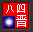
<style>
.page{position:relative;width:33px;height:32px;background:#f20000}
.page>*{position:absolute;margin:0}
.t1{font:10.4px "SimSun";color:#ffffff}
.t2{font:11.7px "SimSun";color:#ffffff}
</style>
<div class="page">
<p class="t1" style="left:6px;top:4px;width:19px;height:9px">八四</p>
<p class="t2" style="left:16px;top:15px;width:11px;height:12px">晋</p>
</div>
